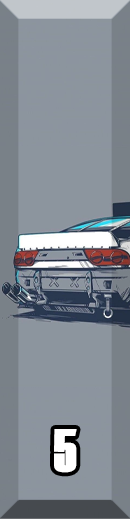
<style>
.page{position:relative;width:130px;height:520px;background:#8c959e}
.page>*{position:absolute;margin:0}
.t1{font:60px "Haettenschweiler";color:#ffffff;font-weight:bold}
</style>
<div class="page">
<p class="t1" style="left:54px;top:429px;width:23px;height:44px">5</p>
</div>
